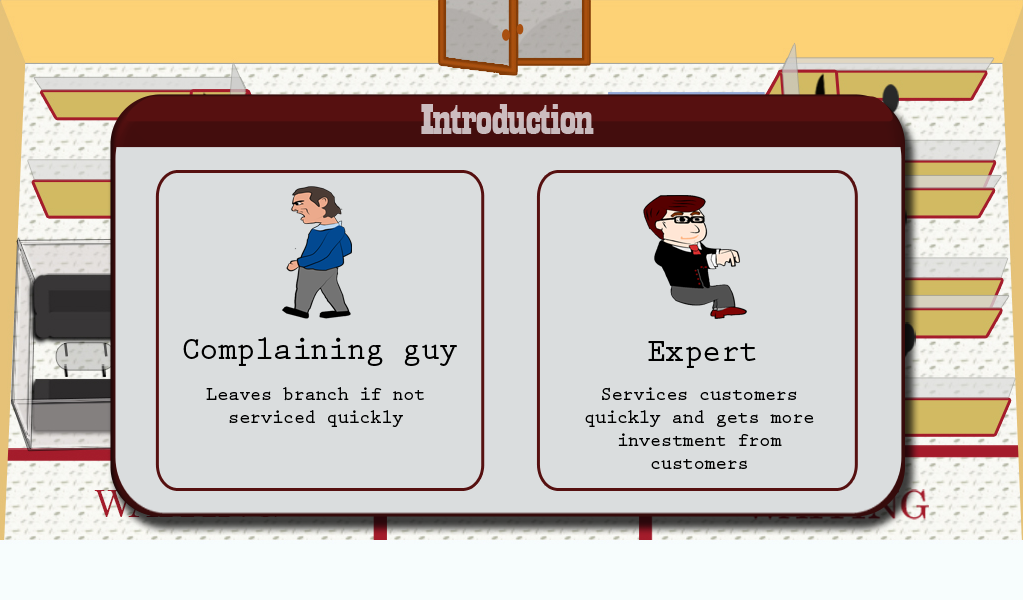
<style>
.page{position:relative;width:1024px;height:600px;background:#daddde}
.page>*{position:absolute;margin:0}
.t1{font:44.6px "Playbill";letter-spacing:-0.025em;color:#c8bbbe;scale:1.61 1}
.t2{font:33.2px "PrestigeEliteStd-Bd";letter-spacing:-0.025em;color:#000000;scale:0.97 1}
.t3{font:19px "PrestigeEliteStd-Bd";letter-spacing:-0.025em;color:#000000}
</style>
<div class="page">
<p class="t1" style="left:421px;top:104px;width:173px;height:30px">Introduction</p>
<p class="t2" style="left:183px;top:337px;width:274px;height:29px">Complaining guy</p>
<p class="t2" style="left:648px;top:341px;width:108px;height:27px">Expert</p>
<p class="t3" style="left:206px;top:387px;width:218px;height:40px;text-align:center">Leaves branch if not serviced quickly</p>
<p class="t3" style="left:585px;top:387px;width:229px;height:82px;text-align:center">Services customers quickly and gets more investment from customers</p>
</div>
